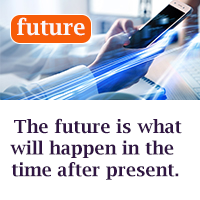
<style>
.page{position:relative;width:200px;height:200px;background:#ffffff}
.page>*{position:absolute;margin:0}
.t1{font:22px "LucidaBright-Demi";color:#f9f8fa}
.t2{font:18px "LucidaBright-Demi";color:#301543}
</style>
<div class="page">
<p class="t1" style="left:17px;top:17px;width:68px;height:19px">future</p>
<p class="t2" style="left:10px;top:118px;width:172px;height:62px;text-align:center">The future is what <br>will happen in the <br> time after present.</p>
</div>
